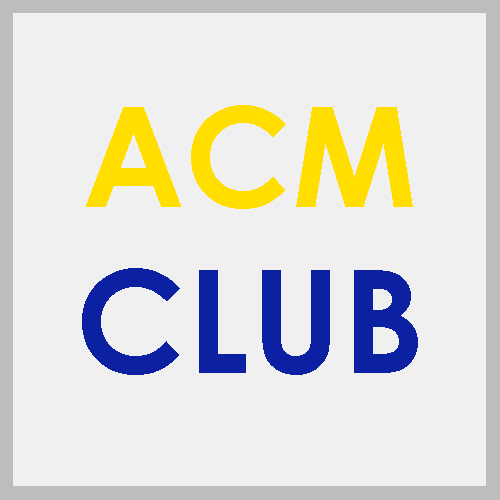
<style>
.page{position:relative;width:500px;height:500px;background:#f0f0f0}
.page>*{position:absolute;margin:0}
.t1{font:138.7px "CenturyGothic-Bold";color:#ffde00}
.t2{font:143.3px "CenturyGothic-Bold";color:#0c21a1}
</style>
<div class="page">
<p class="t1" style="left:86px;top:105px;width:327px;height:104px">ACM</p>
<p class="t2" style="left:82px;top:268px;width:336px;height:107px">CLUB</p>
</div>
